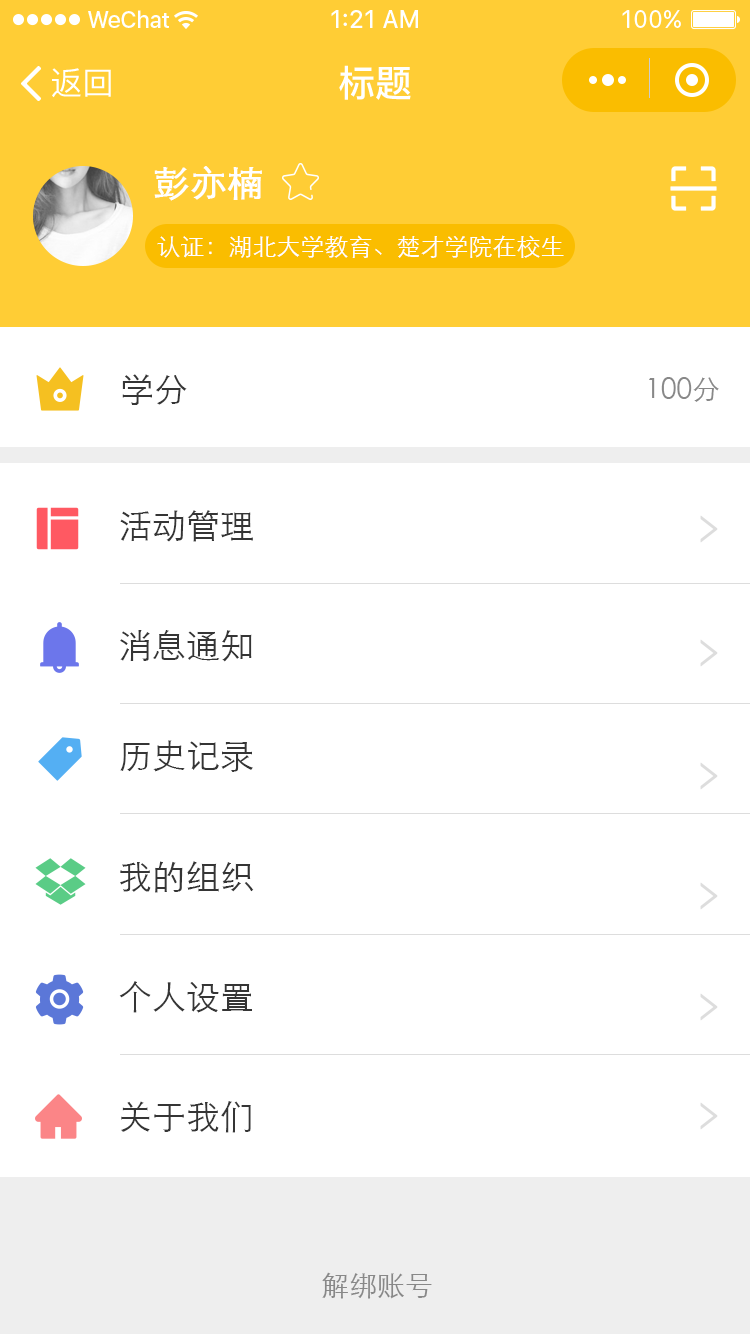
<style>
.page{position:relative;width:750px;height:1334px;background:#ffffff}
.page>*{position:absolute;margin:0}
.t1{font:37px "PingFangSC-Medium";color:#ffffff}
.t2{font:32px "PingFangSC-Regular";color:#ffffff}
.t3{font:36px "STXihei";color:#ffffff;font-weight:bold}
.t4{font:24px "STXihei";color:#ffffff}
.t5{font:34px "STXihei";color:#353535}
.t6{font:28px "STXihei";color:#888888}
</style>
<div class="page">
<p class="t1" style="left:339px;top:65px;width:72px;height:35px">标题</p>
<p class="t2" style="left:52px;top:68px;width:59px;height:30px">返回</p>
<p class="t3" style="left:154px;top:166px;width:108px;height:35px">彭亦楠</p>
<p class="t4" style="left:157px;top:235px;width:407px;height:23px">认证：湖北大学教育、楚才学院在校生</p>
<p class="t5" style="left:122px;top:374px;width:65px;height:31px">学分</p>
<p class="t6" style="left:649px;top:377px;width:70px;height:25px">100分</p>
<p class="t5" style="left:120px;top:510px;width:133px;height:32px">活动管理</p>
<p class="t5" style="left:120px;top:630px;width:132px;height:32px">消息通知</p>
<p class="t5" style="left:120px;top:740px;width:133px;height:32px">历史记录</p>
<p class="t5" style="left:120px;top:861px;width:134px;height:32px">我的组织</p>
<p class="t5" style="left:119px;top:981px;width:133px;height:32px">个人设置</p>
<p class="t5" style="left:121px;top:1101px;width:130px;height:32px">关于我们</p>
<p class="t6" style="left:322px;top:1272px;width:110px;height:27px">解绑账号</p>
</div>
